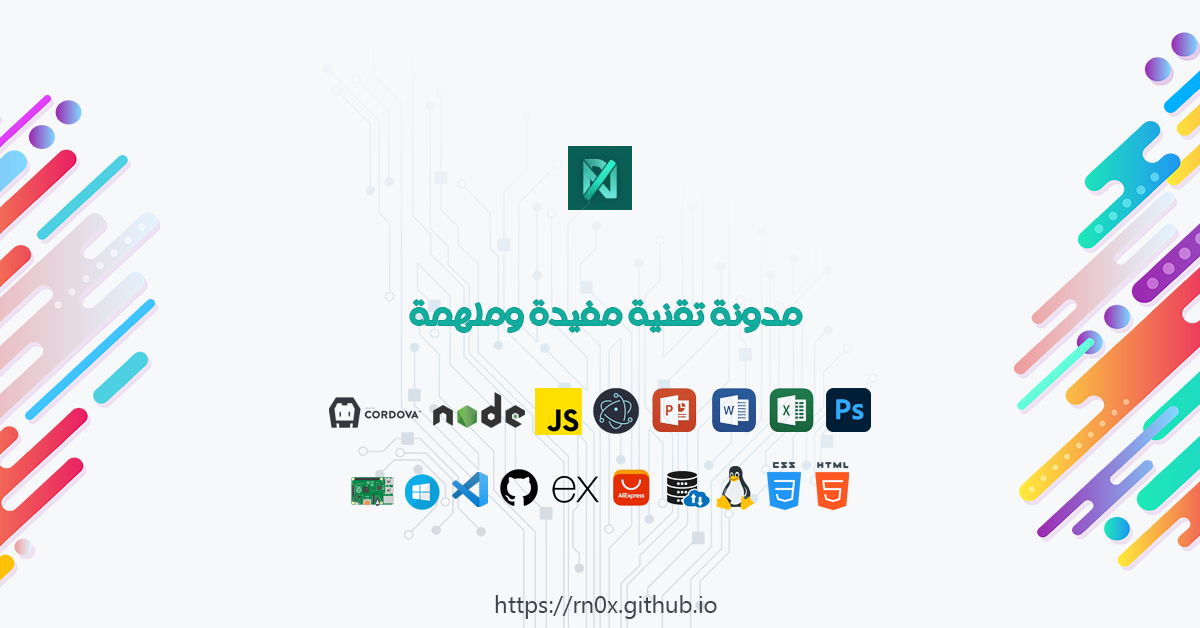
<style>
.page{position:relative;width:1200px;height:628px;background:#f6f8fa}
.page>*{position:absolute;margin:0}
.t1{font:32px "HacenSudanBd";color:#11ad9e}
.t2{font:24px "MicrosoftTaiLe";color:#3e454c}
</style>
<div class="page">
<p class="t1" style="left:410px;top:300px;width:392px;height:32px">مدونة تقنية مفيدة وملهمة</p>
<p class="t2" style="left:495px;top:595px;width:222px;height:24px">https://rn0x.github.io</p>
</div>
